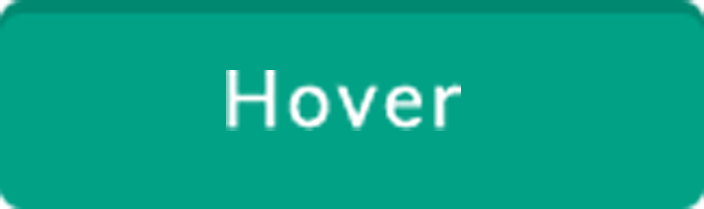
<style>
.page{position:relative;width:704px;height:209px;background:#00a185}
.page>*{position:absolute;margin:0}
.t1{font:78.2px "Lato-Regular";letter-spacing:0.08em;color:#ffffff}
</style>
<div class="page">
<p class="t1" style="left:226px;top:70px;width:235px;height:61px">Hover</p>
</div>
